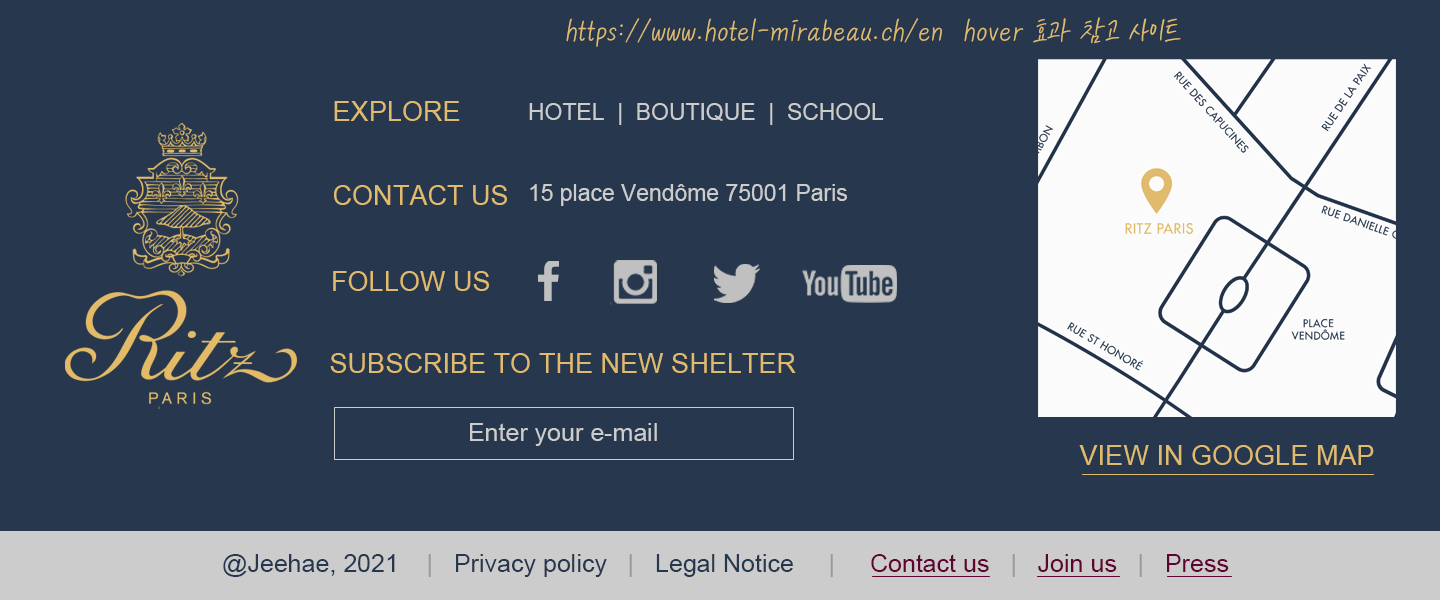
<style>
.page{position:relative;width:1440px;height:600px;background:#27374d}
.page>*{position:absolute;margin:0}
.t1{font:33.3px "KCC-eunyoung-Regular";color:#e0bb6d}
.t2{font:27.1px "ArialMT";color:#e0bb6d}
.t3{font:22.9px "ArialMT";color:#cccccc}
.t4{font:25px "ArialMT";color:#cccccc}
.t5{font:25px "ArialMT";color:#27374d}
.t6{font:25px "ArialMT";color:#999999}
.t7{font:25px "ArialMT";color:#5f0332}
</style>
<div class="page">
<p class="t1" style="left:566px;top:17px;width:615px;height:30px">https://www.hotel-mirabeau.ch/en  hover 효과 참고 사이트</p>
<p class="t2" style="left:334px;top:101px;width:126px;height:20px">EXPLORE</p>
<p class="t3" style="left:529px;top:103px;width:355px;height:22px">HOTEL  |  BOUTIQUE  |  SCHOOL</p>
<p class="t2" style="left:334px;top:185px;width:173px;height:20px">CONTACT US</p>
<p class="t3" style="left:530px;top:184px;width:317px;height:22px">15 place Vendôme 75001 Paris</p>
<p class="t2" style="left:333px;top:271px;width:156px;height:20px">FOLLOW US</p>
<p class="t2" style="left:330px;top:353px;width:466px;height:20px">SUBSCRIBE TO THE NEW SHELTER</p>
<p class="t4" style="left:470px;top:423px;width:187px;height:23px">Enter your e-mail</p>
<p class="t2" style="left:1079px;top:445px;width:295px;height:20px">VIEW IN GOOGLE MAP</p>
<p class="t5" style="left:223px;top:554px;width:1006px;height:23px">@Jeehae, 2021   <span class="t6"> |  </span> Privacy policy  <span class="t6"> |   </span>Legal Notice    <span class="t6"> |  </span><span class="t7">   Contact us   </span><span class="t6">|  </span><span class="t7"> Join us </span><span class="t6">  |   </span><span class="t7">Press</span></p>
</div>
